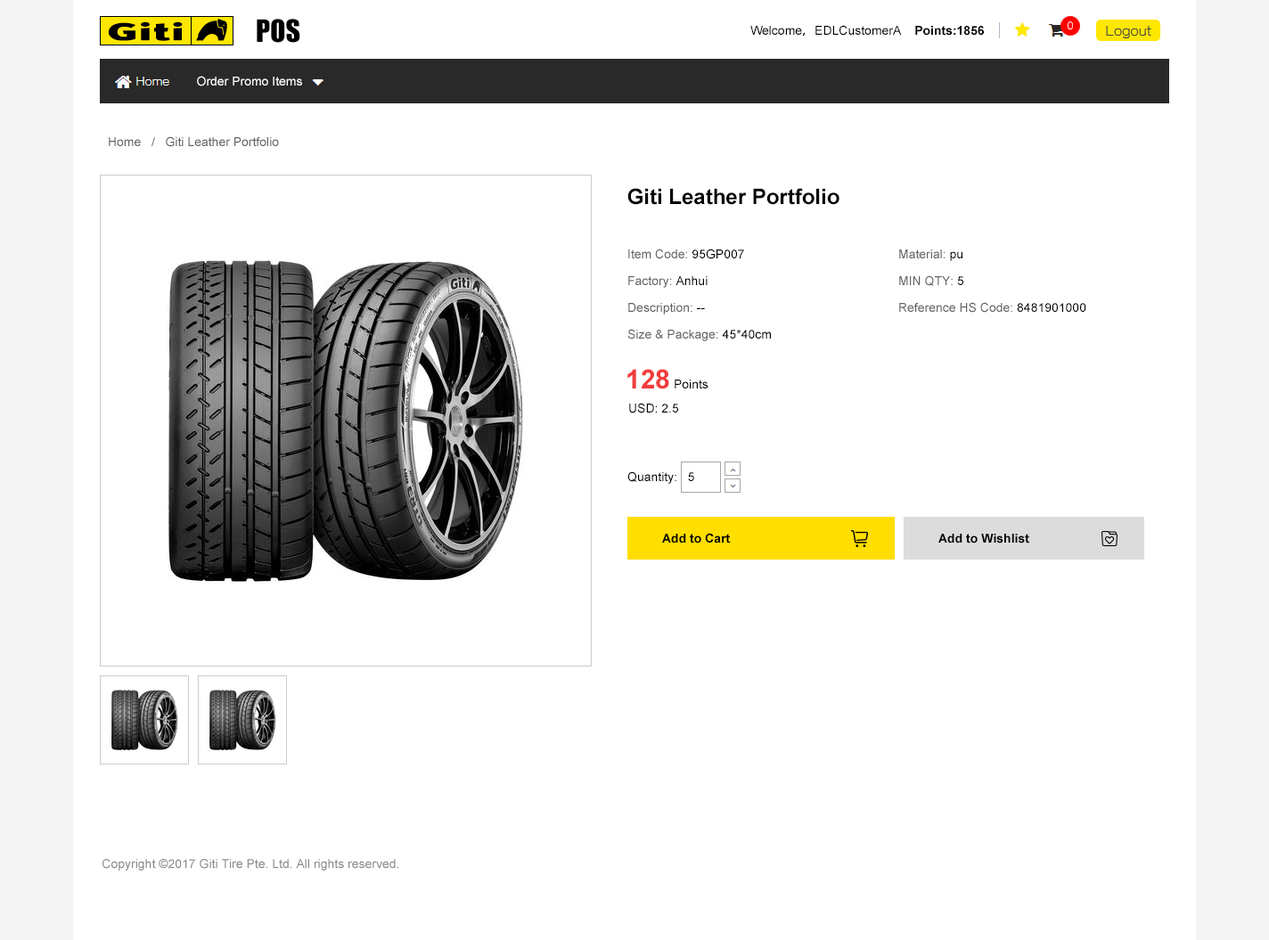
<style>
.page{position:relative;width:1269px;height:940px;background:#ffffff}
.page>*{position:absolute;margin:0}
.t1{font:28.5px "Impact";color:#000000}
.t2{font:12.5px "ArialMT";color:#000000}
.t3{font:12.5px "AdobeHeitiStd-Regular";color:#000000}
.t4{font:12.5px "Arial-BoldMT";color:#000000}
.t5{font:12.5px "ArialMT";color:#ffffff}
.t6{font:12.5px "ArialMT";color:#626262}
.t7{font:21.4px "Arial-BoldMT";color:#010101}
.t8{font:12.5px/26.7px "ArialMT";color:#626262}
.t9{font:12.5px/26.7px "ArialMT";color:#000000}
.t10{font:26.7px "Arial-BoldMT";color:#f23c3c}
.t11{font:12.5px "ArialMT";color:#898989}
</style>
<div class="page">
<p class="t1" style="left:257px;top:19px;width:43px;height:24px">POS</p>
<p class="t2" style="left:750px;top:25px;width:234px;height:12px">Welcome<span class="t3">，</span>EDLCustomerA    <span class="t4">Points:1856</span></p>
<p class="t5" style="left:197px;top:76px;width:105px;height:10px">Order Promo Items</p>
<p class="t6" style="left:109px;top:136px;width:170px;height:11px">Home   /   Giti Leather Portfolio</p>
<p class="t7" style="left:627px;top:188px;width:212px;height:17px">Giti Leather Portfolio</p>
<p class="t8" style="left:627px;top:249px;width:144px;height:92px">Item Code:<span class="t9"> 95GP007<br></span>Factory: <span class="t9">Anhui<br></span>Description: <span class="t9">--<br></span>Size &amp; Package: <span class="t9">45*40cm</span></p>
<p class="t8" style="left:899px;top:249px;width:187px;height:64px">Material: <span class="t9">pu<br></span>MIN QTY:<span class="t9"> 5<br></span>Reference HS Code: <span class="t9">8481901000</span></p>
<p class="t2" style="left:627px;top:369px;width:81px;height:20px"><span class="t10">128</span> Points</p>
<p class="t2" style="left:629px;top:403px;width:49px;height:10px">USD: 2.5</p>
<p class="t2" style="left:627px;top:471px;width:67px;height:13px">Quantity:   5</p>
<p class="t4" style="left:662px;top:533px;width:69px;height:10px">Add to Cart</p>
<p class="t4" style="left:938px;top:534px;width:91px;height:9px">Add to Wishlist</p>
<p class="t11" style="left:102px;top:859px;width:296px;height:11px">Copyright ©2017 Giti Tire Pte. Ltd. All rights reserved.</p>
</div>
